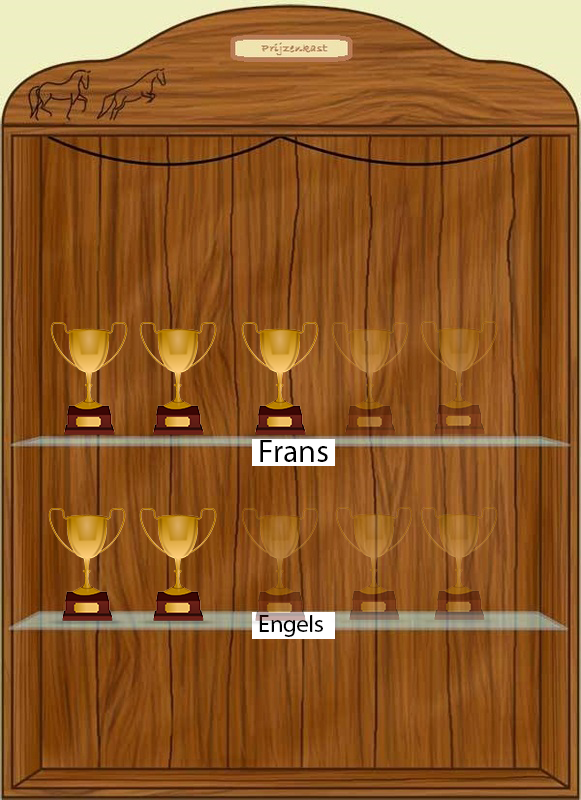
<style>
.page{position:relative;width:581px;height:800px}
.page>*{position:absolute;margin:0}
.t1{font:32px "MyriadPro-Regular";color:#000000}
.t2{font:24px "MyriadPro-Regular";color:#000000}
</style>
<div class="page">
<p class="t1" style="left:260px;top:440px;width:68px;height:22px">Frans</p>
<p class="t2" style="left:259px;top:615px;width:64px;height:22px">Engels</p>
</div>
